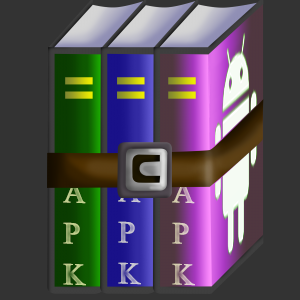
<style>
.page{position:relative;width:300px;height:300px;background:#333333}
.page>*{position:absolute;margin:0}
.t1{font:30.7px/41.2px "TimesNewRomanPSMT";font-weight:bold}
</style>
<div class="page">
<p class="t1" style="left:63px;top:181px;width:23px;height:105px;rotate:2deg">A<br>P<br>K</p>
<p class="t1" style="left:118px;top:180px;width:23px;height:105px;rotate:2deg">A<br>P<br>K</p>
<p class="t1" style="left:172px;top:181px;width:23px;height:105px;rotate:2deg">A<br>P<br>K</p>
</div>
